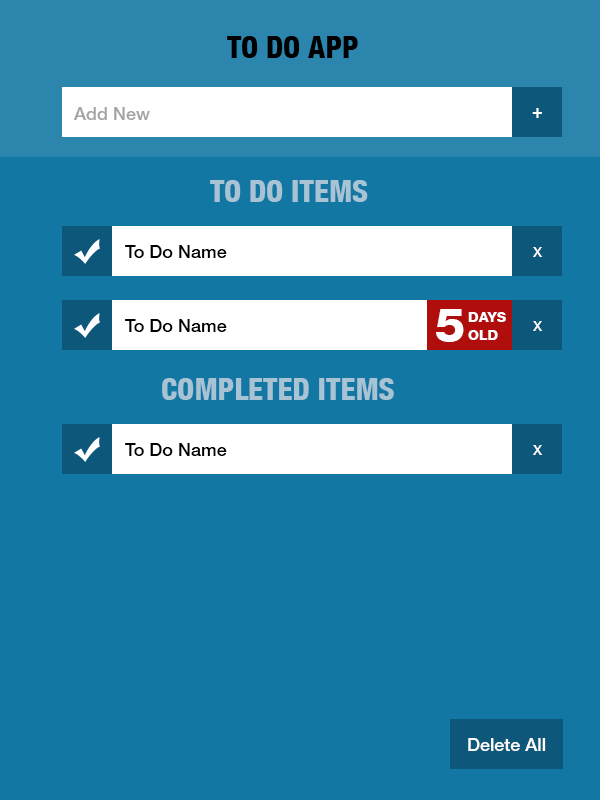
<style>
.page{position:relative;width:600px;height:800px;background:#1377a3}
.page>*{position:absolute;margin:0}
.t1{font:30px "HelveticaNeueLT-HeavyCond";color:#000000;text-transform:uppercase}
.t2{font:18px "HelveticaNeueLT-Medium";color:#a3a3a3}
.t3{font:18px "HelveticaNeueLT-Medium";color:#ffffff}
.t4{font:30px "HelveticaNeueLT-HeavyCond";color:#a7c3d4;text-transform:uppercase}
.t5{font:18px "HelveticaNeueLT-Medium";color:#000000}
.t6{font:14px "HelveticaNeueLT-Medium";color:#ffffff;text-transform:uppercase}
.t7{font:48px "HelveticaNeueLT-Heavy";color:#ffffff}
.t8{font:14px/18px "HelveticaNeueLT-Heavy";color:#ffffff}
</style>
<div class="page">
<p class="t1" style="left:227px;top:36px;width:131px;height:22px">To Do App</p>
<p class="t2" style="left:73px;top:107px;width:77px;height:13px">Add New</p>
<p class="t3" style="left:532px;top:108px;width:10px;height:10px">+</p>
<p class="t4" style="left:210px;top:180px;width:158px;height:22px">To Do ITEMS</p>
<p class="t5" style="left:125px;top:245px;width:102px;height:13px">To Do Name</p>
<p class="t6" style="left:533px;top:247px;width:10px;height:10px">X</p>
<p class="t7" style="left:436px;top:309px;width:28px;height:33px">5</p>
<p class="t8" style="left:468px;top:312px;width:38px;height:28px">DAYS<br>OLD</p>
<p class="t5" style="left:125px;top:319px;width:102px;height:13px">To Do Name</p>
<p class="t6" style="left:533px;top:321px;width:10px;height:10px">X</p>
<p class="t4" style="left:162px;top:378px;width:232px;height:22px">COMPLETED ITEMS</p>
<p class="t5" style="left:125px;top:443px;width:102px;height:13px">To Do Name</p>
<p class="t6" style="left:533px;top:445px;width:10px;height:10px">X</p>
<p class="t3" style="left:468px;top:738px;width:78px;height:13px">Delete All</p>
</div>
